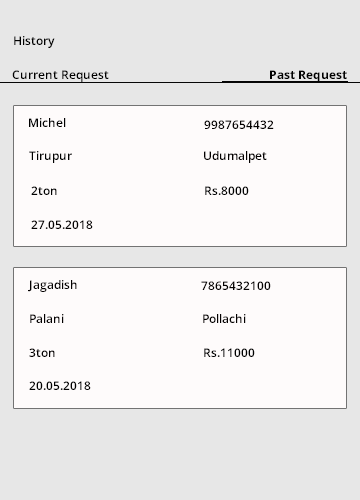
<style>
.page{position:relative;width:360px;height:500px;background:#fefbfb}
.page>*{position:absolute;margin:0}
.t1{font:12px "OpenSans-Semibold";color:#000000}
.t2{font:12px "OpenSans-Bold";color:#000000}
.t3{font:12px "OpenSans-Semibold";color:#030000}
</style>
<div class="page">
<p class="t1" style="left:14px;top:36px;width:41px;height:12px">History</p>
<p class="t1" style="left:12px;top:70px;width:97px;height:12px">Current Request</p>
<p class="t2" style="left:270px;top:70px;width:77px;height:12px">Past Request</p>
<p class="t1" style="left:29px;top:118px;width:37px;height:9px">Michel</p>
<p class="t3" style="left:204px;top:120px;width:70px;height:9px">9987654432</p>
<p class="t1" style="left:29px;top:151px;width:43px;height:12px">Tirupur</p>
<p class="t3" style="left:204px;top:151px;width:63px;height:12px">Udumalpet</p>
<p class="t1" style="left:31px;top:186px;width:26px;height:9px">2ton</p>
<p class="t1" style="left:205px;top:186px;width:44px;height:9px">Rs.8000</p>
<p class="t3" style="left:31px;top:220px;width:62px;height:9px">27.05.2018</p>
<p class="t3" style="left:28px;top:280px;width:49px;height:12px">Jagadish</p>
<p class="t3" style="left:201px;top:281px;width:70px;height:9px">7865432100</p>
<p class="t3" style="left:30px;top:314px;width:34px;height:9px">Palani</p>
<p class="t3" style="left:203px;top:314px;width:43px;height:9px">Pollachi</p>
<p class="t3" style="left:29px;top:348px;width:26px;height:9px">3ton</p>
<p class="t1" style="left:204px;top:348px;width:51px;height:9px">Rs.11000</p>
<p class="t1" style="left:29px;top:381px;width:62px;height:9px">20.05.2018</p>
</div>
